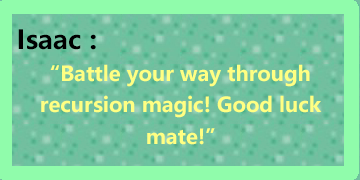
<style>
.page{position:relative;width:360px;height:180px;background:#90fcab}
.page>*{position:absolute;margin:0}
.t1{font:26px "MicrosoftYaHeiUI-Bold";color:#000000}
.t2{font:20.4px/31.5px "MicrosoftYaHeiUI-Bold";color:#ffff82}
</style>
<div class="page">
<p class="t1" style="left:18px;top:29px;width:78px;height:21px">Isaac :</p>
<p class="t2" style="left:41px;top:64px;width:281px;height:81px;text-align:center">“Battle your way through <br>recursion magic! Good luck      mate!”</p>
</div>
